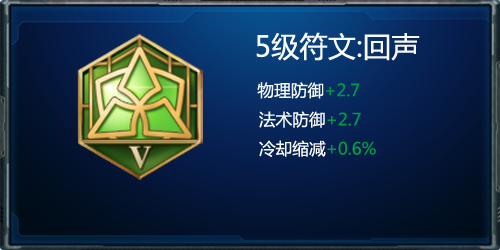
<style>
.page{position:relative;width:500px;height:250px}
.page>*{position:absolute;margin:0}
.t1{font:28.3px "MicrosoftYaHei";color:#f7faf8}
.t2{font:16.7px "MicrosoftYaHei";color:#f7faf8}
.t3{font:16.7px "MicrosoftYaHei";color:#009944}
</style>
<div class="page">
<p class="t1" style="left:256px;top:32px;width:164px;height:125px;text-align:center">5级符文:回声<br><span class="t2">        物理防御</span><span class="t3">+2.7<br></span><span class="t2">  法术防御</span><span class="t3">+2.7<br></span><span class="t2">  冷却缩减</span><span class="t3">+0.6%</span></p>
</div>
